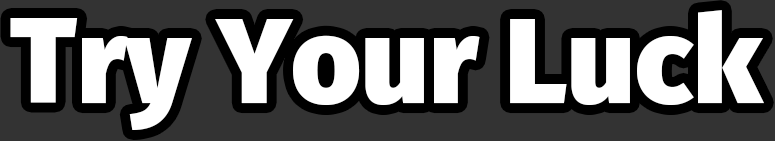
<style>
.page{position:relative;width:775px;height:141px;background:#333333}
.page>*{position:absolute;margin:0}
.t1{font:120px "FiraSans-Black";color:#ffffff}
</style>
<div class="page">
<p class="t1" style="left:10px;top:10px;width:754px;height:120px">Try Your Luck</p>
</div>
